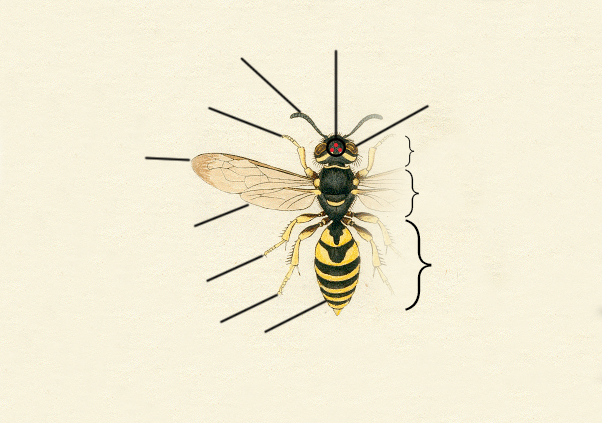
<style>
.page{position:relative;width:602px;height:423px}
.page>*{position:absolute;margin:0}
.t1{font:53.2px "Roboto-Thin"}
.t2{font:82.8px "Roboto-Thin";color:#000000}
.t3{font:157.9px "Roboto-Thin";color:#000000}
</style>
<div class="page">
<p class="t1" style="left:405px;top:135px;width:10px;height:32px">}</p>
<p class="t2" style="left:405px;top:169px;width:14px;height:49px">}</p>
<p class="t3" style="left:405px;top:219px;width:27px;height:92px">}</p>
</div>
